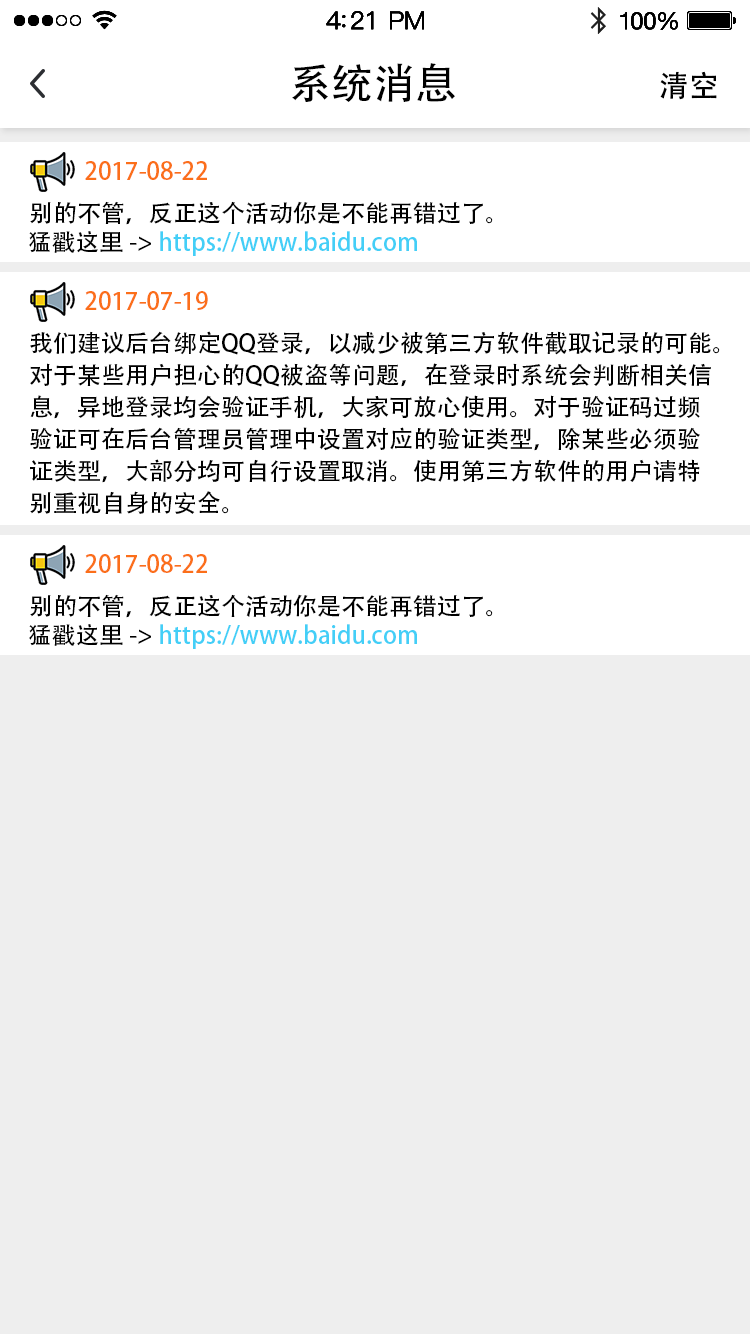
<style>
.page{position:relative;width:750px;height:1334px;background:#eeeeee}
.page>*{position:absolute;margin:0}
.t1{font:42px "AdobeHeitiStd-Regular";color:#000000}
.t2{font:30px "AdobeHeitiStd-Regular";color:#000000}
.t3{font:24px "AdobeHeitiStd-Regular";color:#fb6f1a}
.t4{font:24px "AdobeHeitiStd-Regular";color:#000000}
.t5{font:24px "AdobeHeitiStd-Regular";color:#43cff7}
.t6{font:24px/32px "AdobeHeitiStd-Regular";color:#000000}
</style>
<div class="page">
<p class="t1" style="left:292px;top:63px;width:163px;height:39px">系统消息</p>
<p class="t2" style="left:660px;top:71px;width:57px;height:29px">清空</p>
<p class="t3" style="left:85px;top:161px;width:122px;height:19px">2017-08-22</p>
<p class="t4" style="left:30px;top:201px;width:463px;height:24px">别的不管，反正这个活动你是不能再错过了。</p>
<p class="t5" style="left:29px;top:231px;width:388px;height:25px"><span class="t4">猛戳这里 -&gt; </span>https://www.baidu.com</p>
<p class="t3" style="left:85px;top:291px;width:123px;height:19px">2017-07-19</p>
<p class="t6" style="left:30px;top:331px;width:690px;height:183px">我们建议后台绑定QQ登录，以减少被第三方软件截取记录的可能。<br>对于某些用户担心的QQ被盗等问题，在登录时系统会判断相关信<br>息，异地登录均会验证手机，大家可放心使用。对于验证码过频<br>验证可在后台管理员管理中设置对应的验证类型，除某些必须验<br>证类型，大部分均可自行设置取消。使用第三方软件的用户请特<br>别重视自身的安全。</p>
<p class="t3" style="left:85px;top:554px;width:122px;height:19px">2017-08-22</p>
<p class="t4" style="left:30px;top:594px;width:463px;height:24px">别的不管，反正这个活动你是不能再错过了。</p>
<p class="t5" style="left:29px;top:624px;width:388px;height:25px"><span class="t4">猛戳这里 -&gt; </span>https://www.baidu.com</p>
</div>
